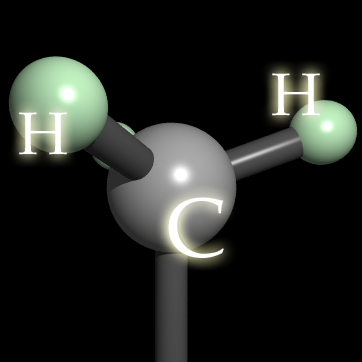
<style>
.page{position:relative;width:362px;height:362px;background:#000000}
.page>*{position:absolute;margin:0}
.t1{font:60px "BookAntiqua";color:#ffffff}
.t2{font:85px "BookAntiqua";color:#ffffff}
</style>
<div class="page">
<p class="t1" style="left:272px;top:73px;width:48px;height:43px">H</p>
<p class="t1" style="left:19px;top:112px;width:48px;height:43px">H</p>
<p class="t2" style="left:168px;top:197px;width:56px;height:61px">C</p>
</div>
